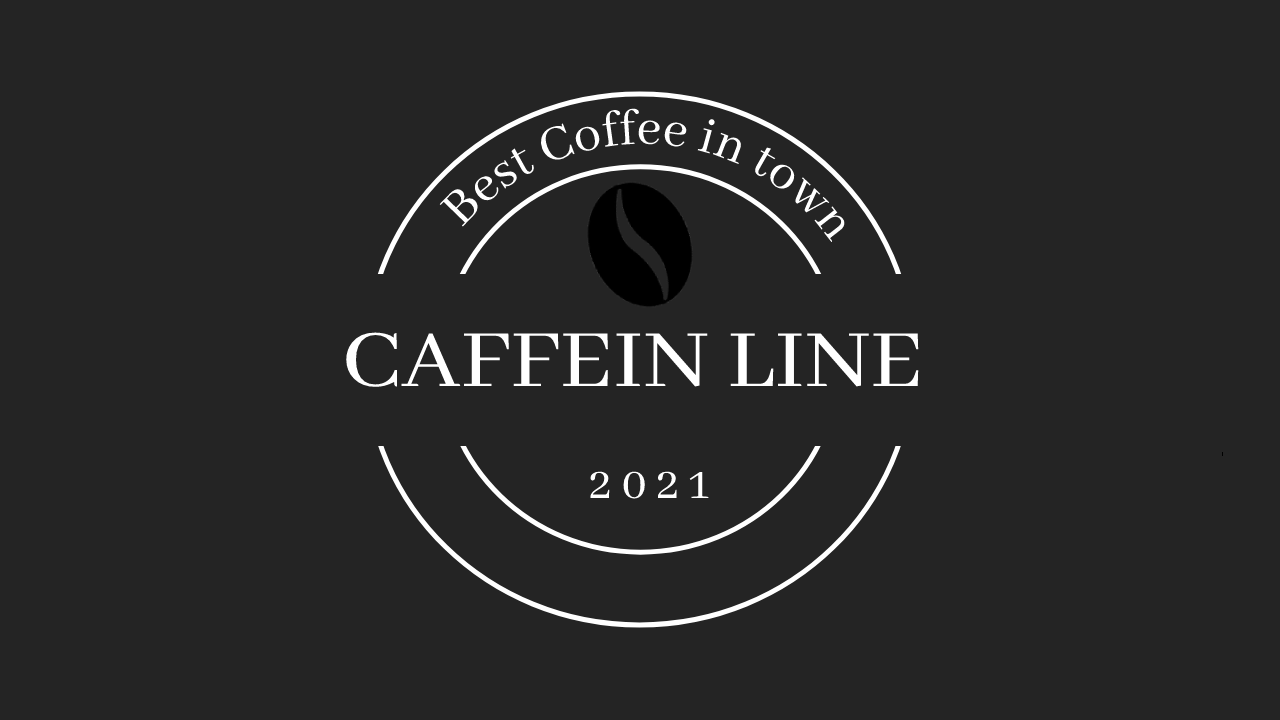
<style>
.page{position:relative;width:1280px;height:720px;background:#242424}
.page>*{position:absolute;margin:0}
.t1{font:55px "AbhayaLibre-Regular";color:#ffffff}
.t2{font:89.7px "AbhayaLibre-Regular";color:#ffffff;scale:1.1 1}
.t3{font:50px "AbhayaLibre-Regular";color:#ffffff}
</style>
<div class="page">
<p class="t1" style="left:439px;top:108px;width:406px;height:134px;rotate:121deg">Best Coffee in town</p>
<p class="t2" style="left:346px;top:332px;width:573px;height:55px">CAFFEIN LINE</p>
<p class="t3" style="left:590px;top:471px;width:119px;height:28px">2 0 2 1</p>
</div>
